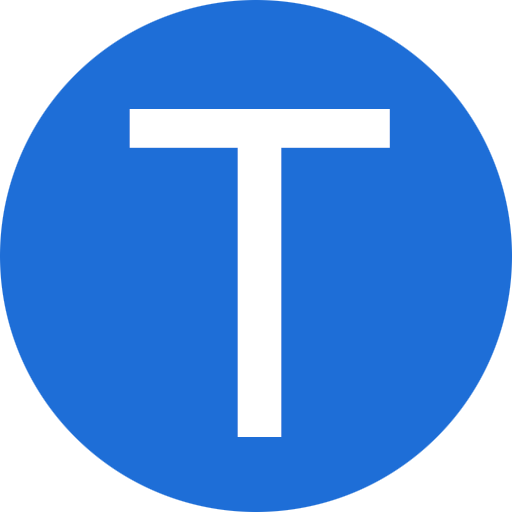
<style>
.page{position:relative;width:512px;height:512px;background:#1e6ed7}
.page>*{position:absolute;margin:0}
.t1{font:458.3px "ArialMT";color:#ffffff}
</style>
<div class="page">
<p class="t1" style="left:129px;top:109px;width:261px;height:328px">T</p>
</div>
